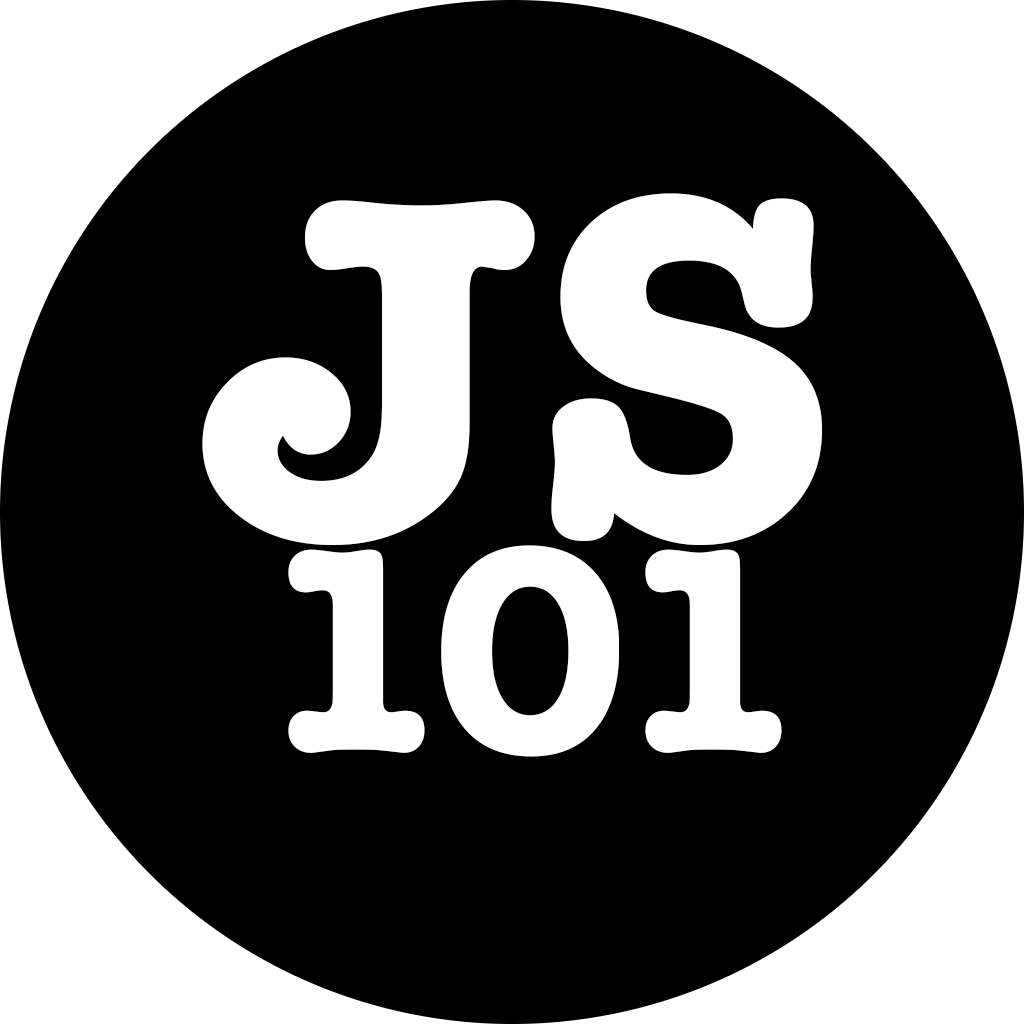
<style>
.page{position:relative;width:1024px;height:1024px;background:#000000}
.page>*{position:absolute;margin:0}
.t1{font:500px "AmericanTypewriter-Bold";color:#ffffff}
.t2{font:300px "AmericanTypewriter-Bold";color:#ffffff}
</style>
<div class="page">
<p class="t1" style="left:202px;top:193px;width:620px;height:352px">JS</p>
<p class="t2" style="left:288px;top:545px;width:494px;height:212px">101</p>
</div>
